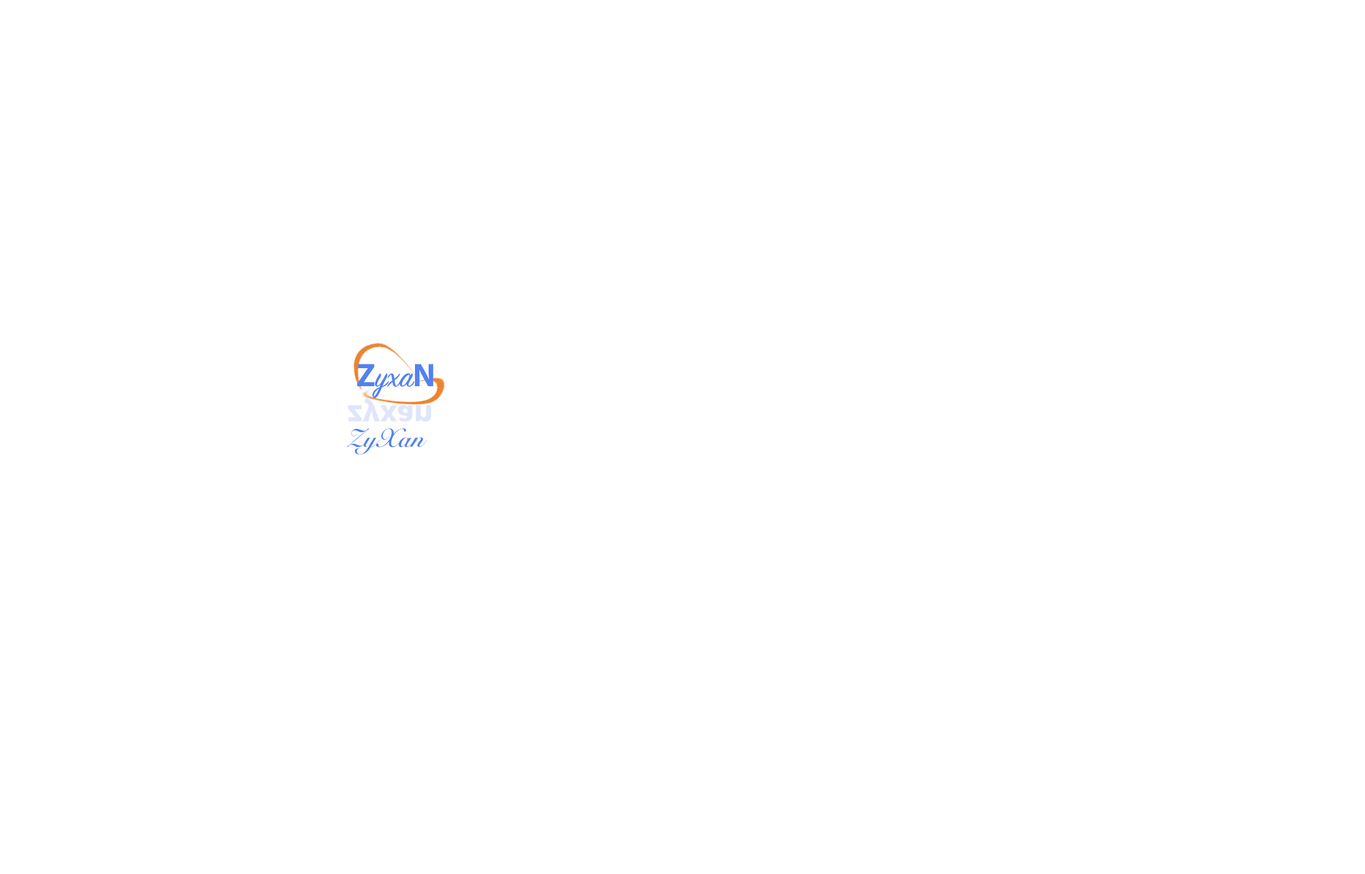
<style>
.page{position:relative;width:1365px;height:874px;background:#ffffff}
.page>*{position:absolute;margin:0}
.t1{font:32.8px "SignPainter-HouseScript";color:#5282f0}
.t2{font:32.8px "MyriadPro-Bold";color:#5282f0}
.t3{font:32.8px "MyriadPro-Bold";color:#dfe6fc}
.t4{font:25.4px "SnellRoundhand-Bold";color:#5282f0}
</style>
<div class="page">
<p class="t1" style="left:357px;top:364px;width:77px;height:34px"><span class="t2">Z</span>yxa<span class="t2">N</span></p>
<p class="t3" style="left:348px;top:397px;width:83px;height:25px">zyxan</p>
<p class="t4" style="left:347px;top:428px;width:81px;height:26px">ZyXan</p>
</div>
